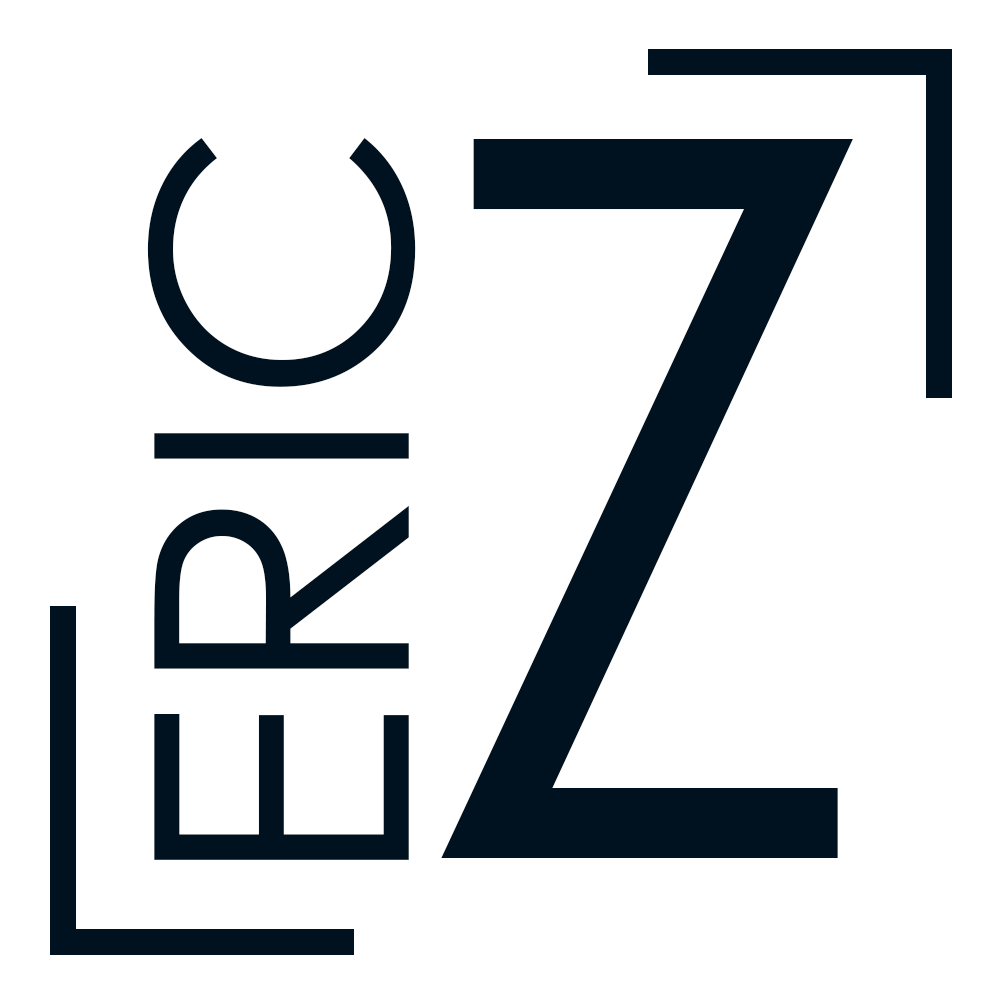
<style>
.page{position:relative;width:1000px;height:1000px;background:#ffffff}
.page>*{position:absolute;margin:0}
.t1{font:354.2px "CenturyGothic";color:#001220}
.t2{font:1001.3px "CenturyGothic";color:#001220}
</style>
<div class="page">
<p class="t1" style="left:147px;top:138px;width:269px;height:722px;rotate:-90deg">ERIC</p>
<p class="t2" style="left:441px;top:139px;width:412px;height:719px">Z</p>
</div>
